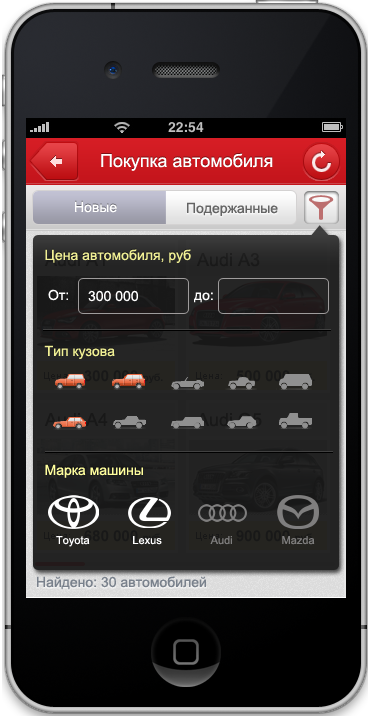
<style>
.page{position:relative;width:368px;height:716px}
.page>*{position:absolute;margin:0}
.t1{font:18px "ArialMT";color:#ffffff}
.t2{font:14px "ArialMT";color:#ffffff}
.t3{font:14px "ArialMT";color:#646464}
.t4{font:14px "ArialMT";color:#f1f095}
.t5{font:18px "ArialMT";color:#1a1a1a}
.t6{font:10px "ArialMT";color:#010101}
.t7{font:14px "ArialMT";color:#fffe9d}
.t8{font:11px "ArialMT";color:#ffffff}
.t9{font:11px "ArialMT";color:#7f7e7e}
.t10{font:14px "ArialMT";color:#7d7d7d}
</style>
<div class="page">
<p class="t1" style="left:101px;top:153px;width:172px;height:18px">Покупка автомобиля</p>
<p class="t2" style="left:75px;top:201px;width:42px;height:12px">Новые</p>
<p class="t3" style="left:187px;top:202px;width:91px;height:14px">Подержанные</p>
<p class="t4" style="left:45px;top:249px;width:146px;height:14px">Цена автомобиля, руб</p>
<p class="t5" style="left:196px;top:253px;width:64px;height:14px">Audi A3</p>
<p class="t2" style="left:48px;top:289px;width:20px;height:12px">От:</p>
<p class="t2" style="left:88px;top:290px;width:50px;height:12px">300 000</p>
<p class="t2" style="left:194px;top:292px;width:19px;height:11px">до:</p>
<p class="t4" style="left:44px;top:345px;width:71px;height:14px">Тип кузова</p>
<p class="t6" style="left:196px;top:372px;width:26px;height:9px">Цена:</p>
<p class="t7" style="left:45px;top:464px;width:98px;height:14px">Марка машины</p>
<p class="t8" style="left:56px;top:536px;width:259px;height:11px">Toyota              Lexus              <span class="t9">  Audi                Mazda</span></p>
<p class="t10" style="left:37px;top:576px;width:169px;height:14px">Найдено: 30 автомобилей</p>
</div>
